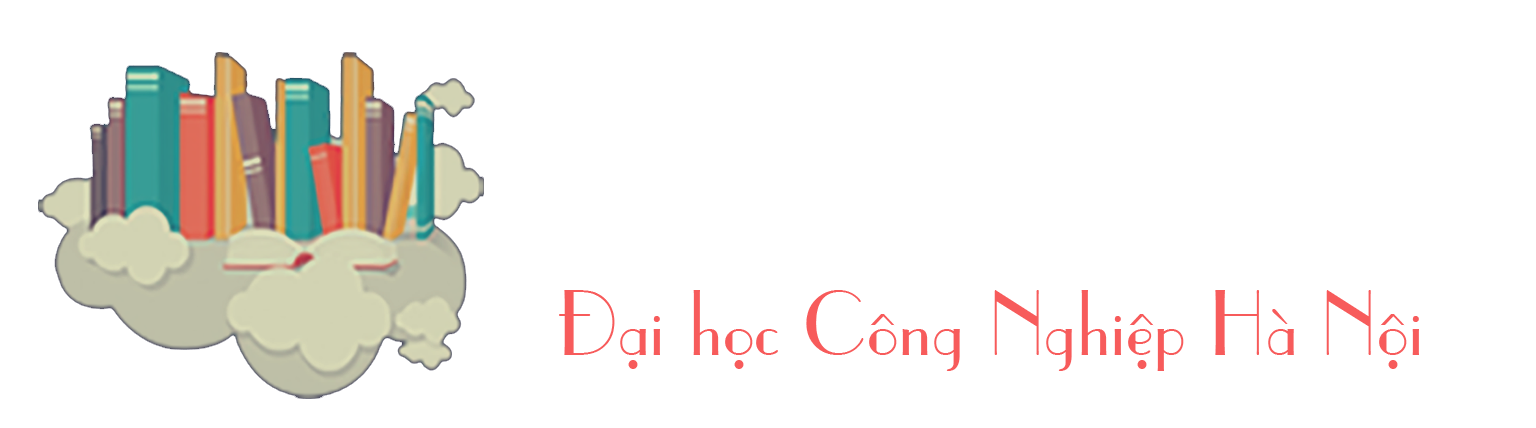
<style>
.page{position:relative;width:1536px;height:428px;background:#ffffff}
.page>*{position:absolute;margin:0}
.t1{font:86.1px "UVNBaLe";color:#f75b5b}
</style>
<div class="page">
<p class="t1" style="left:559px;top:290px;width:860px;height:81px">Đại học Công Nghiệp Hà Nội</p>
</div>
